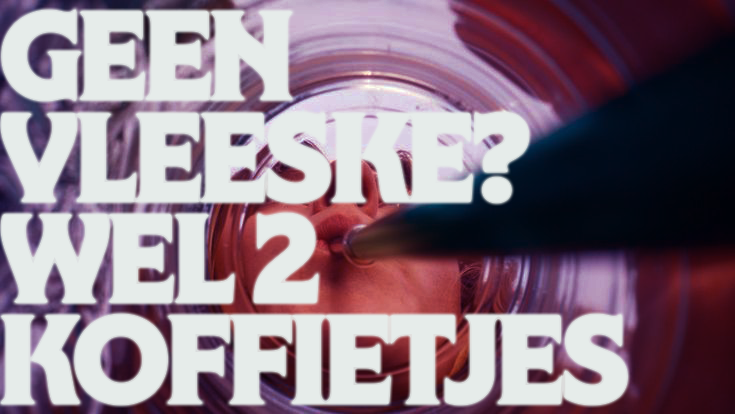
<style>
.page{position:relative;width:735px;height:414px;background:#e6ecea}
.page>*{position:absolute;margin:0}
.t1{font:101.1px/101.1px "NYBotanicalGothic-Extrabold";letter-spacing:-0.02em;color:#e6ecea;scale:1.04 1}
</style>
<div class="page">
<p class="t1" style="left:0px;top:9px;width:627px;height:395px">GEEN VLEESKE?<br>WEL 2<br>KOFFIETJES</p>
</div>
